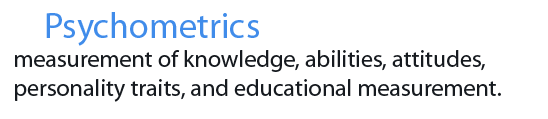
<style>
.page{position:relative;width:548px;height:119px;background:#ffffff}
.page>*{position:absolute;margin:0}
.t1{font:24px "MyriadPro-Regular";color:#161a1f}
.t2{font:36px "MyriadPro-Regular";color:#408cea}
</style>
<div class="page">
<p class="t1" style="left:15px;top:12px;width:486px;height:90px"><span class="t2">    Psychometrics<br></span>measurement of knowledge, abilities, attitudes,<br>personality traits, and educational measurement.</p>
</div>
